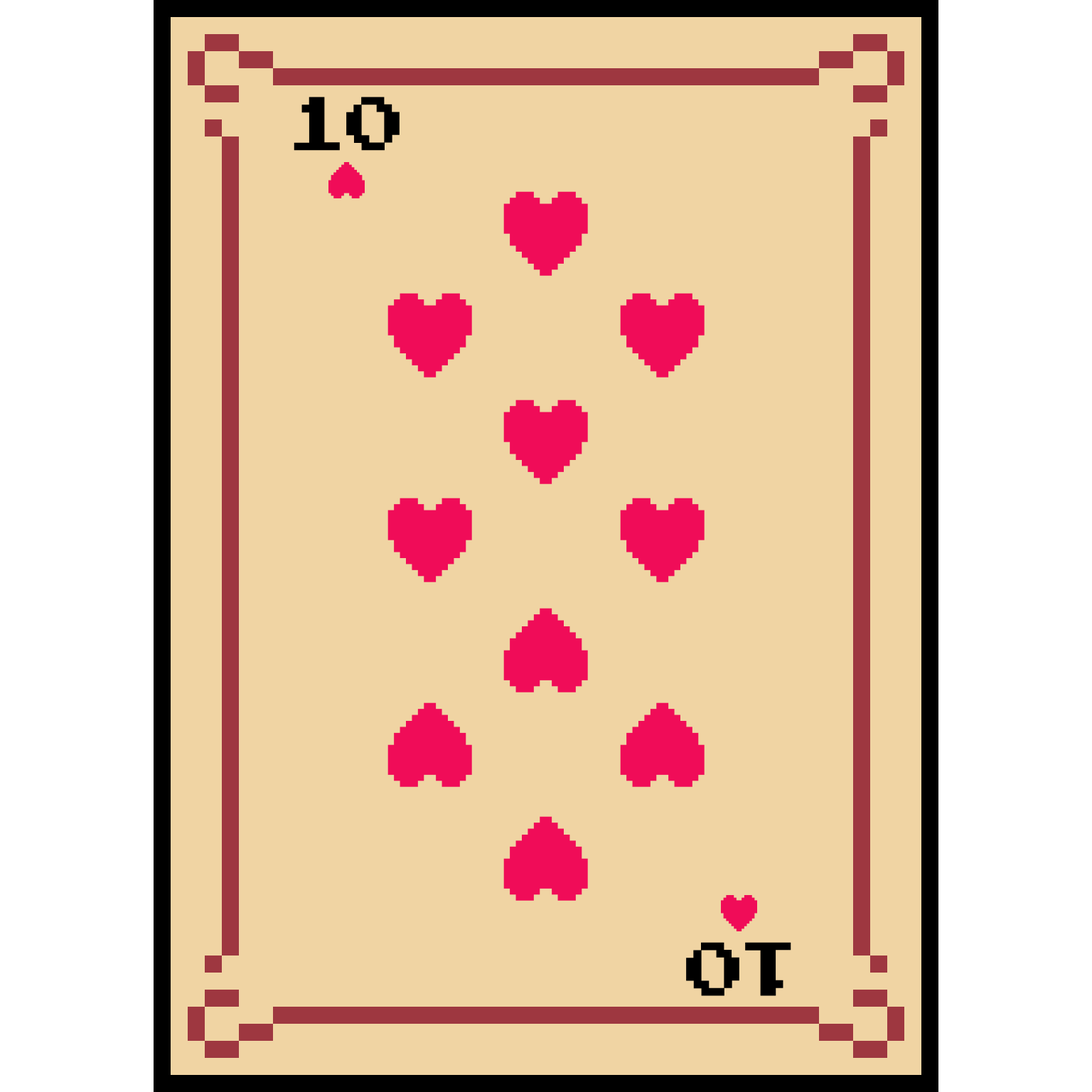
<style>
.page{position:relative;width:1092px;height:1092px;background:#f0d4a3}
.page>*{position:absolute;margin:0}
.t1{font:106.6px "ArcadeClassic";color:#000000}
</style>
<div class="page">
<p class="t1" style="left:294px;top:97px;width:106px;height:54px">10</p>
<p class="t1" style="left:686px;top:942px;width:105px;height:54px;rotate:-180deg">10</p>
</div>
